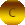
<style>
.page{position:relative;width:25px;height:25px}
.page>*{position:absolute;margin:0}
.t1{font:12px "MyriadPro-Regular";color:#684406}
</style>
<div class="page">
<p class="t1" style="left:9px;top:8px;width:7px;height:9px">C</p>
</div>
